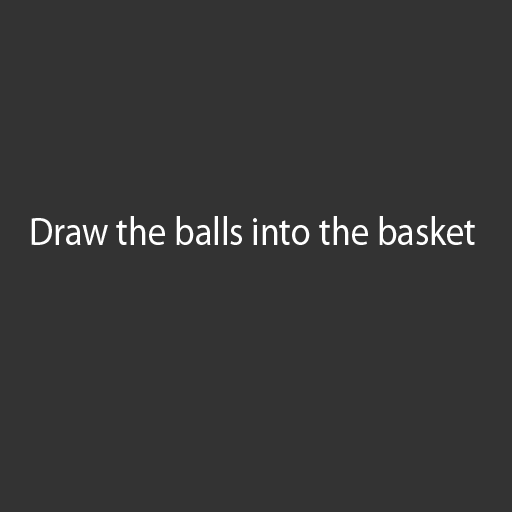
<style>
.page{position:relative;width:512px;height:512px;background:#333333}
.page>*{position:absolute;margin:0}
.t1{font:39.8px "MyriadPro-Regular";color:#ffffff;scale:0.91 1}
</style>
<div class="page">
<p class="t1" style="left:31px;top:216px;width:444px;height:29px">Draw the balls into the basket</p>
</div>
